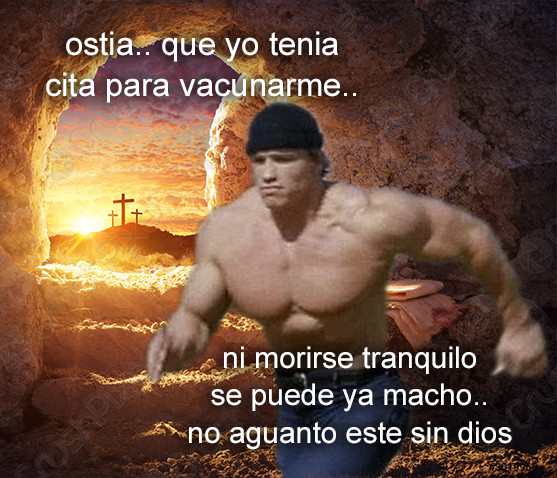
<style>
.page{position:relative;width:557px;height:478px}
.page>*{position:absolute;margin:0}
.t1{font:32.7px "ArialMT";color:#ffffff}
.t2{font:30px "ArialMT";color:#ffffff}
</style>
<div class="page">
<p class="t1" style="left:46px;top:31px;width:310px;height:72px;text-align:center">ostia.. que yo tenia<br>cita para vacunarme..</p>
<p class="t2" style="left:189px;top:346px;width:323px;height:104px;text-align:center">ni morirse tranquilo<br>se puede ya macho..<br>no aguanto este sin dios</p>
</div>
